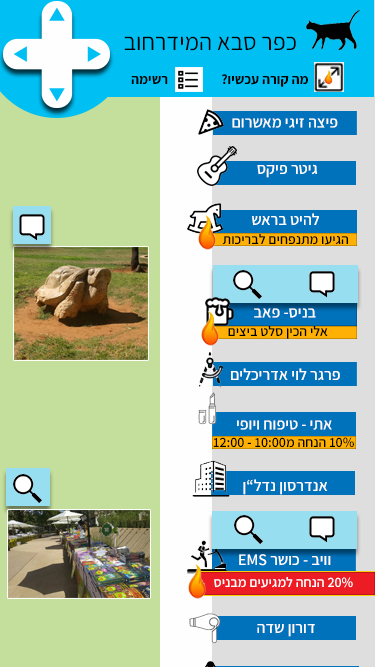
<style>
.page{position:relative;width:375px;height:667px;background:#c4df9b}
.page>*{position:absolute;margin:0}
.t1{font:24px "Assistant-Regular";color:#000000}
.t2{font:14px "Assistant-Bold";color:#000000}
.t3{font:16px "Assistant-SemiBold";color:#ffffff}
.t4{font:14px "Assistant-SemiBold";color:#000000}
.t5{font:14px "Assistant-SemiBold";color:#ffffff}
.t6{font:14px "Assistant-SemiBold";color:#ffffff;text-decoration:underline}
</style>
<div class="page">
<p class="t1" style="left:124px;top:36px;width:172px;height:15px">כפר סבא המידרחוב</p>
<p class="t2" style="left:131px;top:76px;width:37px;height:9px">רשימה</p>
<p class="t2" style="left:221px;top:74px;width:87px;height:13px">מה קורה עכשיו?</p>
<p class="t3" style="left:232px;top:118px;width:106px;height:10px">פיצה זיגי מאשרום</p>
<p class="t3" style="left:257px;top:164px;width:61px;height:14px">גיטר פיקס</p>
<p class="t3" style="left:252px;top:213px;width:67px;height:13px">להיט בראש</p>
<p class="t4" style="left:222px;top:234px;width:126px;height:11px">הגיעו מתנפחים לבריכות</p>
<p class="t3" style="left:254px;top:308px;width:62px;height:10px">בניס- פאב</p>
<p class="t4" style="left:228px;top:326px;width:100px;height:13px">אלי הכין סלט ביצים</p>
<p class="t3" style="left:231px;top:368px;width:109px;height:13px">פרגר לוי אדריכלים</p>
<p class="t3" style="left:237px;top:420px;width:95px;height:10px">אתי - טיפוח ויופי</p>
<p class="t4" style="left:213px;top:437px;width:141px;height:11px">10% הנחה מ10:00 - 12:00</p>
<p class="t3" style="left:243px;top:479px;width:85px;height:16px">אנדרסון נדל”ן</p>
<p class="t3" style="left:239px;top:554px;width:92px;height:12px">וויב - כושר EMS</p>
<p class="t5" style="left:214px;top:577px;width:139px;height:11px">20% הנחה למגיעים <span class="t6">מבניס</span></p>
<p class="t3" style="left:257px;top:624px;width:58px;height:13px">דורון שדה</p>
</div>
